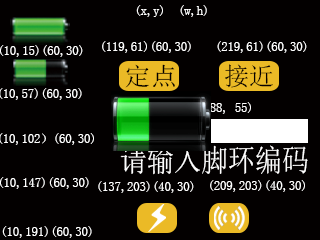
<style>
.page{position:relative;width:320px;height:240px;background:#030000}
.page>*{position:absolute;margin:0}
.t1{font:12.5px "SimSun";color:#ffffff}
.t2{font:25px "SimSun";color:#040000;scale:1.07 1}
.t3{font:25px "SimSun";color:#060001}
.t4{font:12.5px "SimSun"}
.t5{font:30.9px "SimSun";color:#ffffff;scale:0.87 1}
</style>
<div class="page">
<p class="t1" style="left:136px;top:5px;width:71px;height:12px">(x,y)  (w,h)</p>
<p class="t1" style="left:102px;top:41px;width:89px;height:12px">(119,61)(60,30)</p>
<p class="t1" style="left:217px;top:41px;width:90px;height:12px">(219,61)(60,30)</p>
<p class="t1" style="left:0px;top:45px;width:83px;height:12px">(10,15)(60,30)</p>
<p class="t2" style="left:125px;top:64px;width:50px;height:24px">定点</p>
<p class="t3" style="left:225px;top:64px;width:48px;height:24px">接近</p>
<p class="t1" style="left:0px;top:88px;width:82px;height:12px">(10,57)(60,30)</p>
<p class="t4" style="left:137px;top:102px;width:114px;height:12px">(120,119) (188, 55)</p>
<p class="t1" style="left:0px;top:133px;width:94px;height:12px">(10,102）(60,30)</p>
<p class="t5" style="left:120px;top:145px;width:188px;height:30px">请输入脚环编码</p>
<p class="t1" style="left:0px;top:177px;width:89px;height:12px">(10,147)(60,30)</p>
<p class="t1" style="left:98px;top:181px;width:96px;height:12px">(137,203)(40,30)</p>
<p class="t1" style="left:210px;top:180px;width:95px;height:12px">(209,203)(40,30)</p>
<p class="t1" style="left:2px;top:226px;width:90px;height:12px">(10,191)(60,30)</p>
</div>
